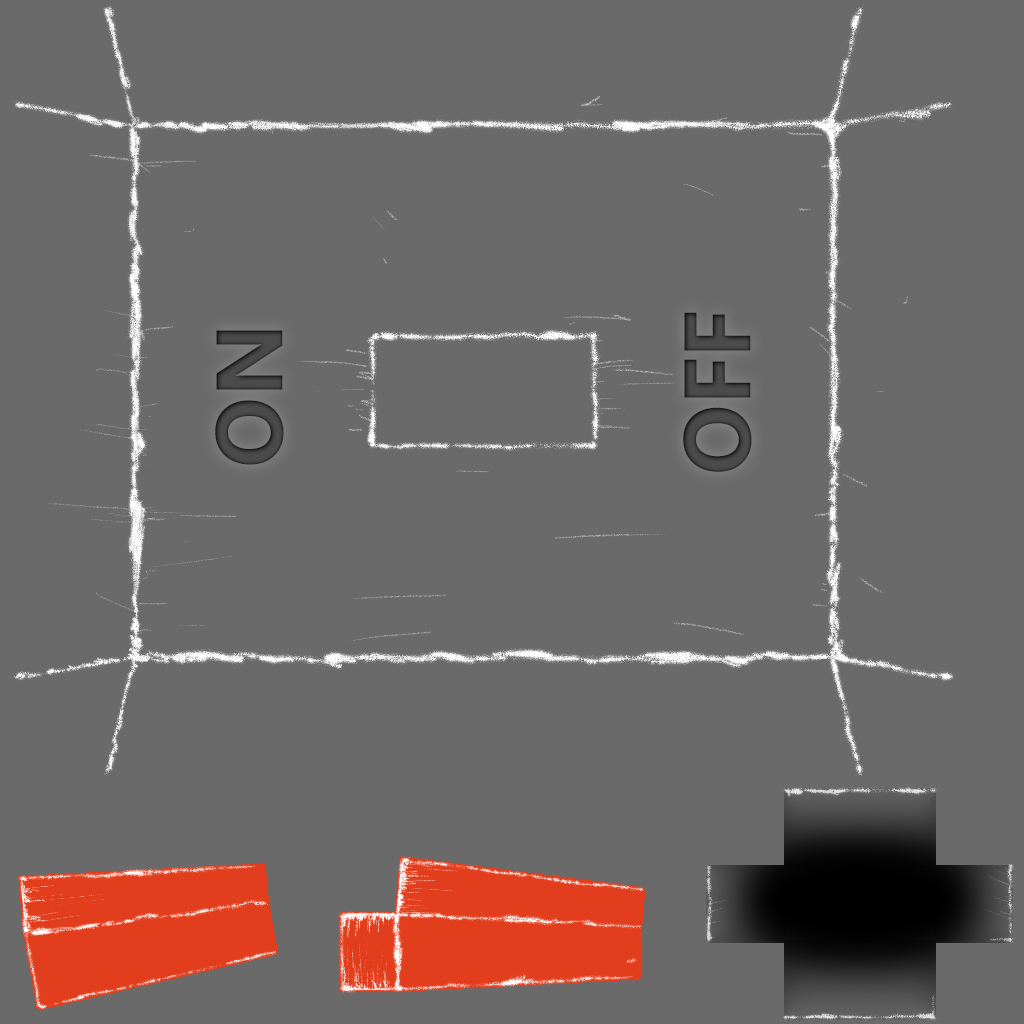
<style>
.page{position:relative;width:1024px;height:1024px;background:#6a6a6a}
.page>*{position:absolute;margin:0}
.t1{font:94px "Ebrima-Bold";letter-spacing:-0.01em;color:#464646}
</style>
<div class="page">
<p class="t1" style="left:683px;top:312px;width:69px;height:160px;rotate:-90deg">OFF</p>
<p class="t1" style="left:215px;top:330px;width:69px;height:135px;rotate:-90deg">ON</p>
</div>
